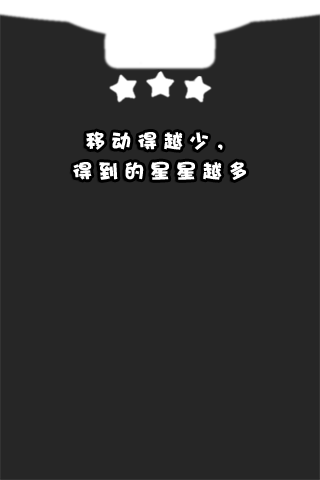
<style>
.page{position:relative;width:320px;height:480px;background:#262626}
.page>*{position:absolute;margin:0}
.t1{font:20px/30px "DFPHaiBaoW12";letter-spacing:0.3em;color:#ffffff}
</style>
<div class="page">
<p class="t1" style="left:73px;top:131px;width:173px;height:49px;text-align:center">移动得越少，<br>得到的星星越多</p>
</div>
